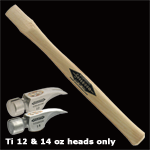
<style>
.page{position:relative;width:150px;height:150px;background:#060303}
.page>*{position:absolute;margin:0}
.t1{font:7.5px "Verdana-Bold";letter-spacing:0.01em;color:#fefdfd;font-weight:bold}
</style>
<div class="page">
<p class="t1" style="left:5px;top:138px;width:111px;height:8px">Ti 12 &amp; 14 oz heads only</p>
</div>
